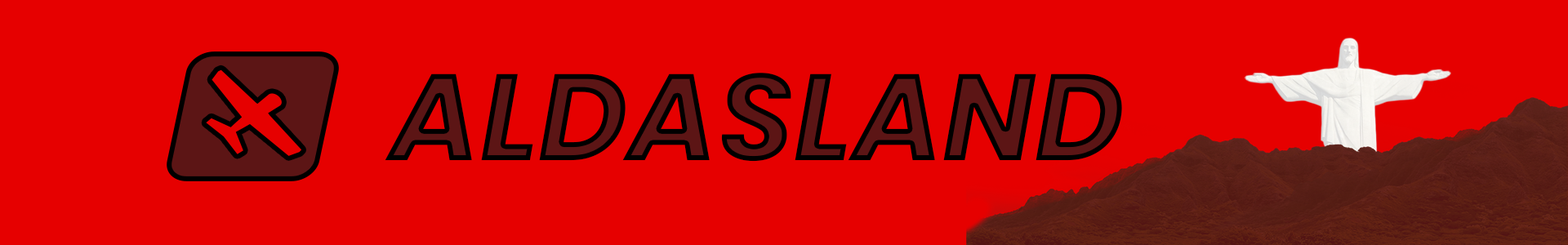
<style>
.page{position:relative;width:1568px;height:245px;background:#e60000}
.page>*{position:absolute;margin:0}
.t1{font:122.5px "Poppins-BoldItalic"}
</style>
<div class="page">
<p class="t1" style="left:385px;top:73px;width:737px;height:89px">ALDASLAND</p>
</div>
